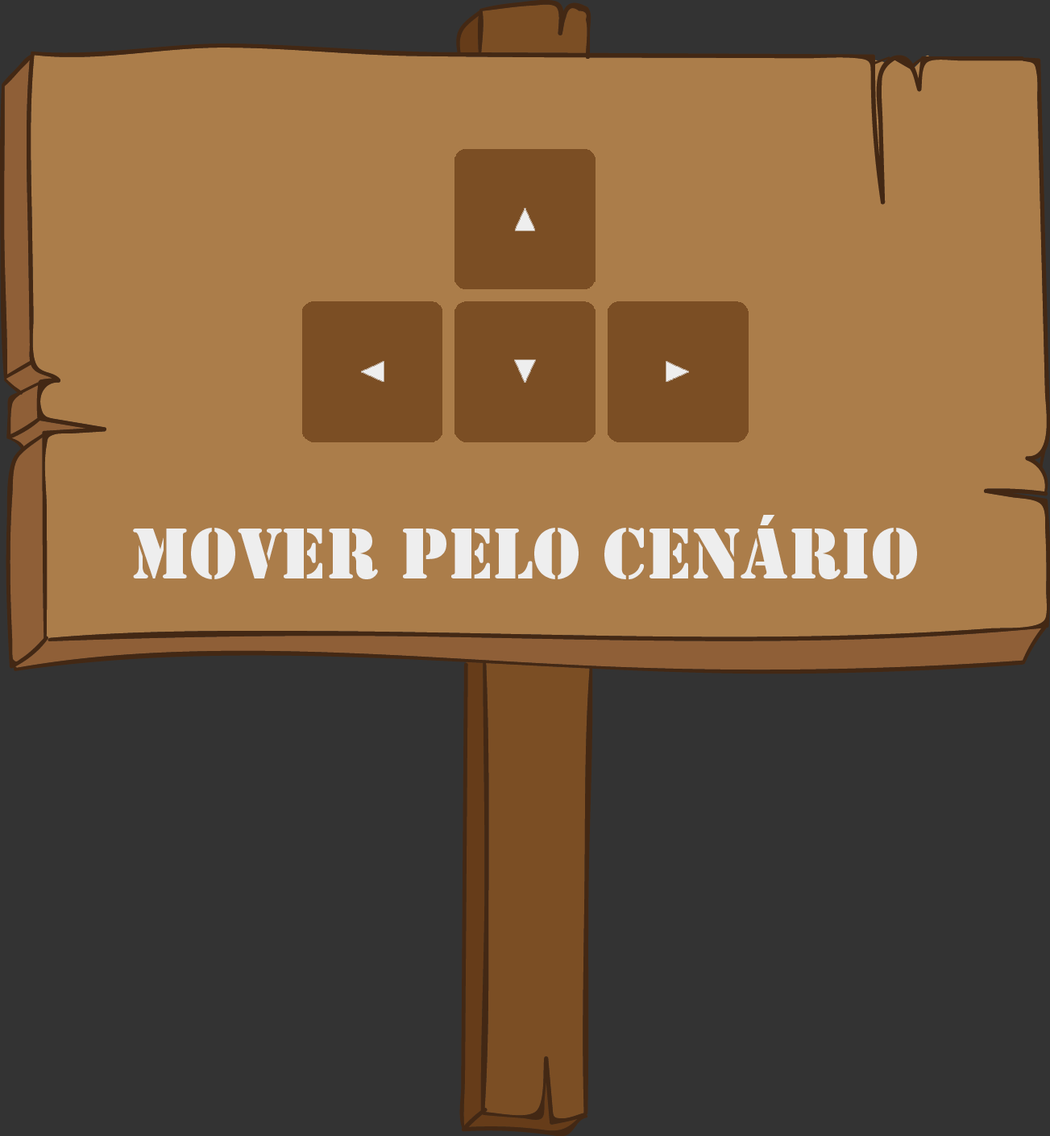
<style>
.page{position:relative;width:1050px;height:1136px;background:#333333}
.page>*{position:absolute;margin:0}
.t1{font:16.1px "StencilStd";color:#eeeeee}
</style>
<div class="page">
<p class="t1" style="left:133px;top:515px;width:784px;height:64px">Mover pelo cenário</p>
</div>
